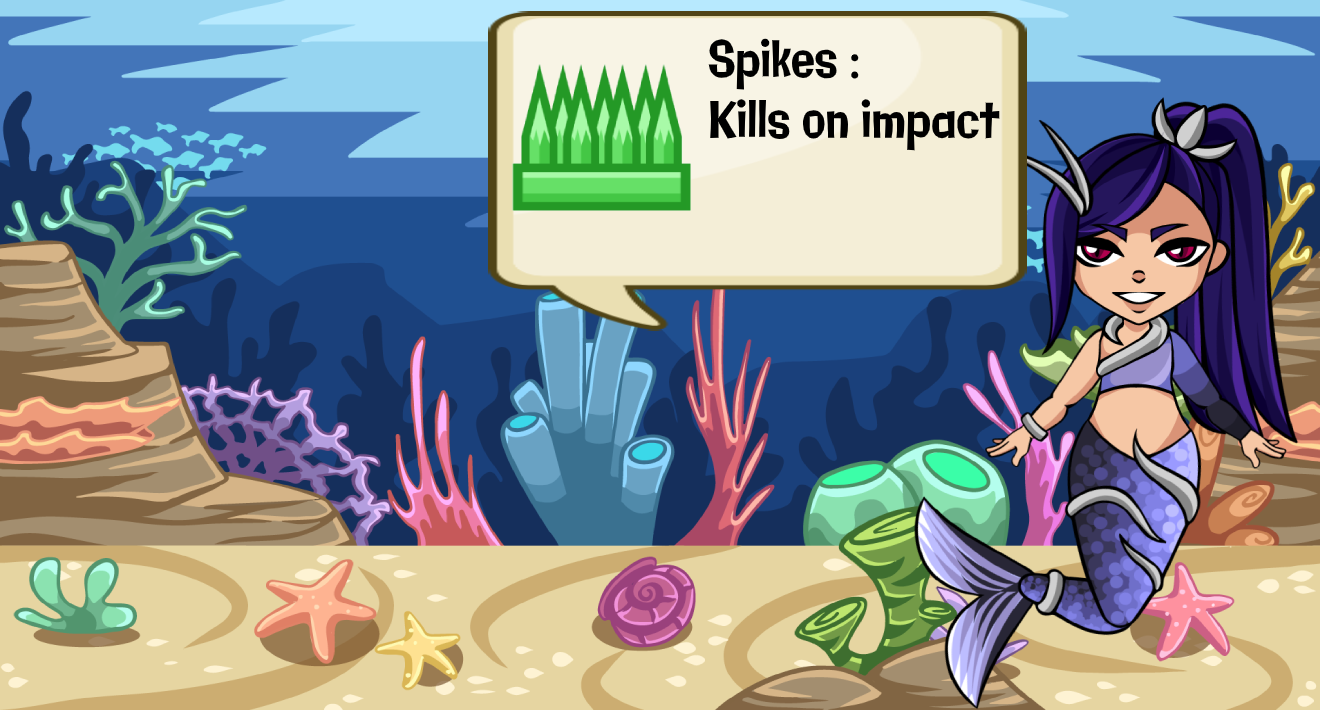
<style>
.page{position:relative;width:1320px;height:710px}
.page>*{position:absolute;margin:0}
.t1{font:50.5px "Galindo-Regular";color:#000000;scale:0.77 1}
</style>
<div class="page">
<p class="t1" style="left:708px;top:38px;width:292px;height:113px">Spikes : <br>Kills on impact</p>
</div>
